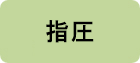
<style>
.page{position:relative;width:140px;height:63px;background:#c3d79c}
.page>*{position:absolute;margin:0}
.t1{font:24px "HGSGothicE";letter-spacing:0.065em;color:#000000}
</style>
<div class="page">
<p class="t1" style="left:46px;top:20px;width:48px;height:23px">指圧</p>
</div>
